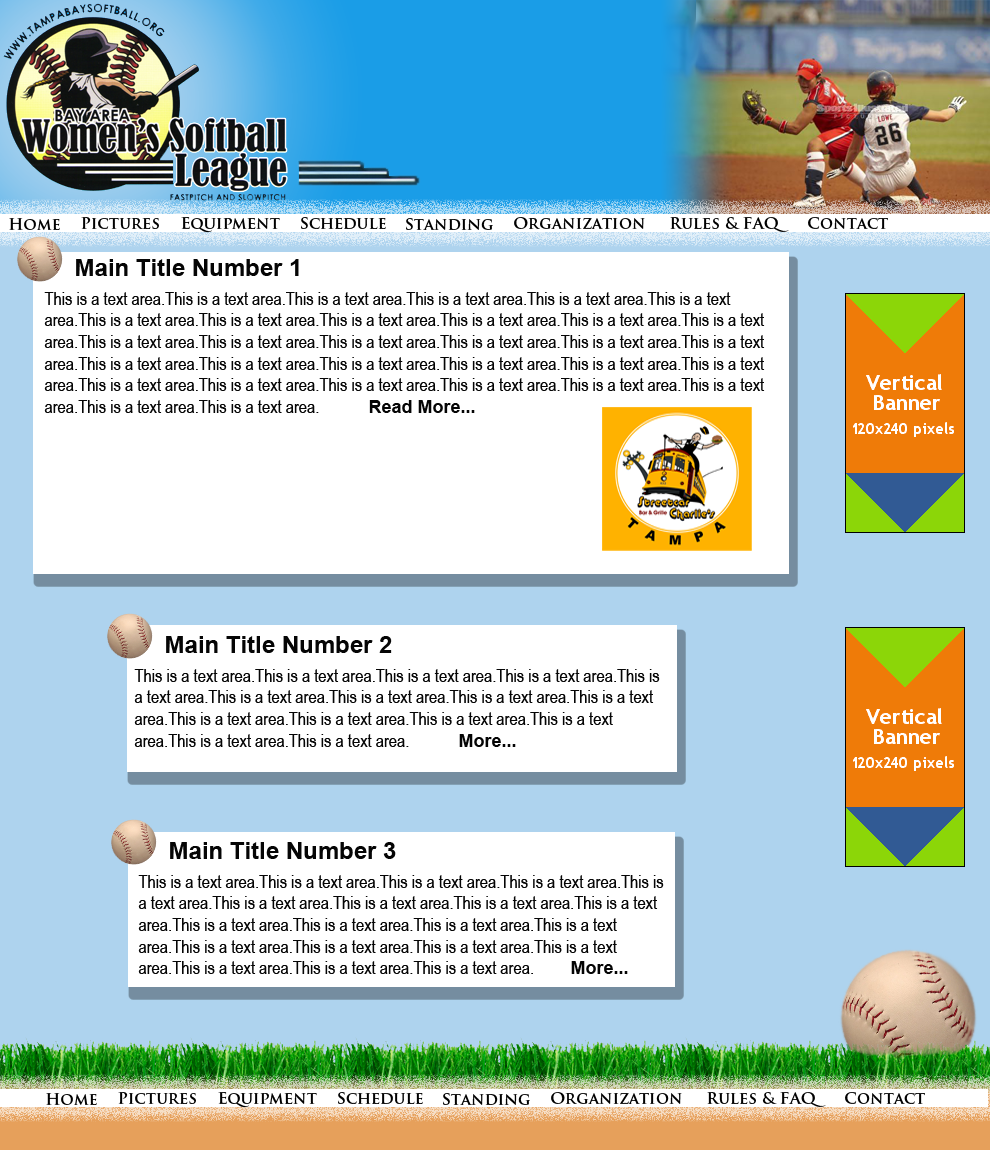
<style>
.page{position:relative;width:990px;height:1150px;background:#ffffff}
.page>*{position:absolute;margin:0}
.t1{font:16px "TrajanPro-Bold";color:#000000}
.t2{font:24px "Arial-BoldMT";color:#050505}
.t3{font:18px "ArialNarrow";color:#050505}
.t4{font:18px "Arial-BoldMT";color:#050505}
</style>
<div class="page">
<p class="t1" style="left:9px;top:218px;width:51px;height:12px">Home</p>
<p class="t1" style="left:81px;top:217px;width:78px;height:12px">Pictures</p>
<p class="t1" style="left:181px;top:217px;width:99px;height:16px">Equipment</p>
<p class="t1" style="left:301px;top:217px;width:85px;height:12px">Schedule</p>
<p class="t1" style="left:406px;top:218px;width:87px;height:12px">Standing</p>
<p class="t1" style="left:514px;top:217px;width:131px;height:12px">Organization</p>
<p class="t1" style="left:670px;top:217px;width:119px;height:15px">Rules &amp; FAQ</p>
<p class="t1" style="left:808px;top:217px;width:80px;height:12px">Contact</p>
<p class="t2" style="left:76px;top:259px;width:223px;height:17px">Main Title Number 1</p>
<p class="t3" style="left:44px;top:292px;width:721px;height:121px">This is a text area.This is a text area.This is a text area.This is a text area.This is a text area.This is a text area.This is a text area.This is a text area.This is a text area.This is a text area.This is a text area.This is a text area.This is a text area.This is a text area.This is a text area.This is a text area.This is a text area.This is a text area.This is a text area.This is a text area.This is a text area.This is a text area.This is a text area.This is a text area.This is a text area.This is a text area.This is a text area.This is a text area.This is a text area.This is a text area.This is a text area.This is a text area.  <span class="t4">Read More...</span></p>
<p class="t2" style="left:166px;top:636px;width:226px;height:17px">Main Title Number 2</p>
<p class="t3" style="left:134px;top:669px;width:526px;height:78px">This is a text area.This is a text area.This is a text area.This is a text area.This is a text area.This is a text area.This is a text area.This is a text area.This is a text area.This is a text area.This is a text area.This is a text area.This is a text area.This is a text area.This is a text area.  <span class="t4">More...</span></p>
<p class="t2" style="left:170px;top:842px;width:226px;height:17px">Main Title Number 3</p>
<p class="t3" style="left:138px;top:875px;width:526px;height:99px">This is a text area.This is a text area.This is a text area.This is a text area.This is a text area.This is a text area.This is a text area.This is a text area.This is a text area.This is a text area.This is a text area.This is a text area.This is a text area.This is a text area.This is a text area.This is a text area.This is a text area.This is a text area.This is a text area.This is a text area.  <span class="t4">More...</span></p>
<p class="t1" style="left:46px;top:1093px;width:51px;height:12px">Home</p>
<p class="t1" style="left:118px;top:1092px;width:78px;height:12px">Pictures</p>
<p class="t1" style="left:218px;top:1092px;width:99px;height:16px">Equipment</p>
<p class="t1" style="left:338px;top:1092px;width:85px;height:12px">Schedule</p>
<p class="t1" style="left:443px;top:1093px;width:87px;height:12px">Standing</p>
<p class="t1" style="left:551px;top:1092px;width:131px;height:12px">Organization</p>
<p class="t1" style="left:707px;top:1092px;width:119px;height:15px">Rules &amp; FAQ</p>
<p class="t1" style="left:845px;top:1092px;width:80px;height:12px">Contact</p>
</div>
